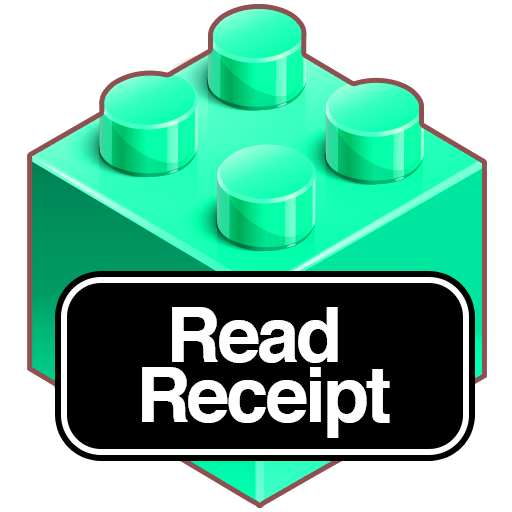
<style>
.page{position:relative;width:512px;height:512px;background:#ffffff}
.page>*{position:absolute;margin:0}
.t1{font:75.5px/60.5px "Helvetica-Bold";letter-spacing:-0.04em;color:#ffffff}
</style>
<div class="page">
<p class="t1" style="left:142px;top:307px;width:248px;height:131px;text-align:center">Read <br>Receipt</p>
</div>
